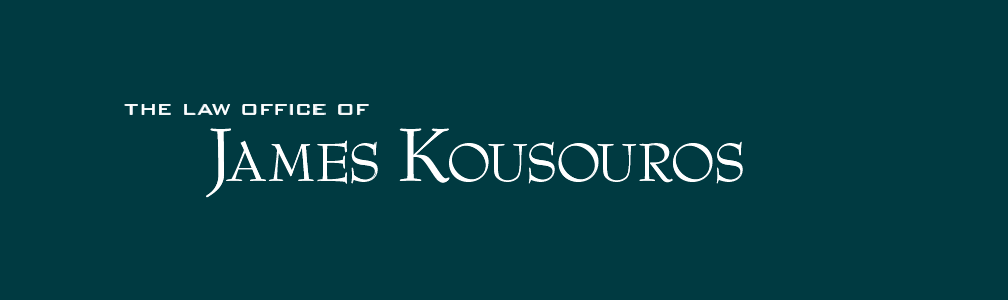
<style>
.page{position:relative;width:1008px;height:300px;background:#003a41}
.page>*{position:absolute;margin:0}
.t1{font:26px "BankGothicBT-Light";color:#ffffff}
.t2{font:82px/66px "BernhardModernStd-Roman";color:#ffffff;text-transform:uppercase}
.t3{font:59px/66px "BernhardModernStd-Roman";color:#ffffff;text-transform:uppercase}
.t4{font:59px/66px "BernhardModernStd-Roman";letter-spacing:-0.1em;color:#ffffff;text-transform:uppercase}
</style>
<div class="page">
<p class="t1" style="left:124px;top:104px;width:619px;height:93px">the law office of<br>      <span class="t2">J</span><span class="t3">ames </span><span class="t2">K</span><span class="t4">ousouros</span></p>
</div>
